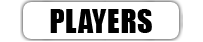
<style>
.page{position:relative;width:203px;height:42px;background:#ffffff}
.page>*{position:absolute;margin:0}
.t1{font:30px "Impact";letter-spacing:0.025em;color:#000000}
</style>
<div class="page">
<p class="t1" style="left:50px;top:9px;width:102px;height:24px">PLAYERS</p>
</div>
